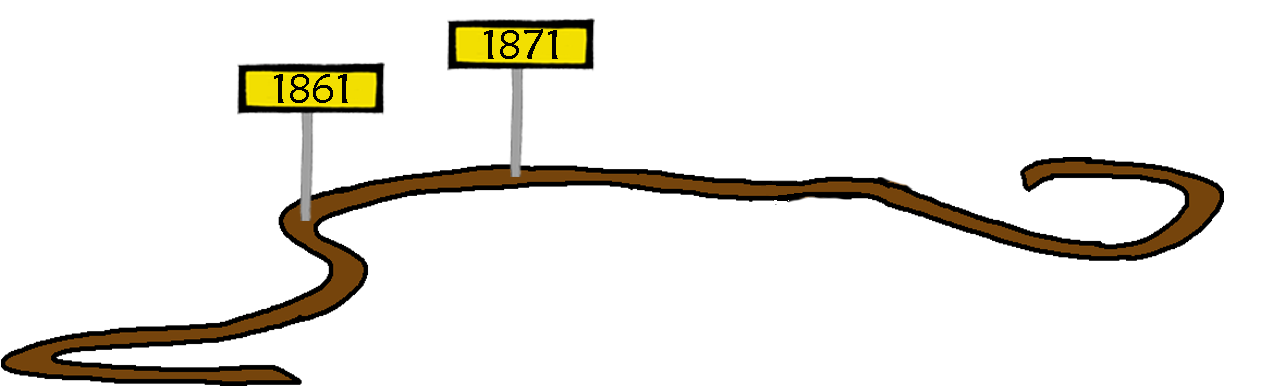
<style>
.page{position:relative;width:1278px;height:386px;background:#ffffff}
.page>*{position:absolute;margin:0}
.t1{font:41.7px "MaiandraGD-Regular";color:#000000}
</style>
<div class="page">
<p class="t1" style="left:484px;top:29px;width:74px;height:30px">1871</p>
<p class="t1" style="left:274px;top:74px;width:74px;height:29px">1861</p>
</div>
